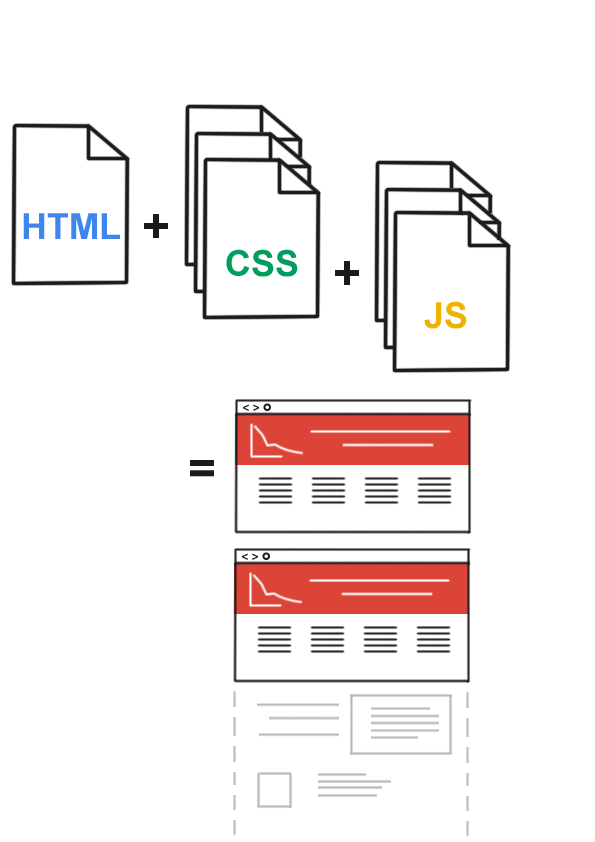
<style>
.page{position:relative;width:595px;height:842px;background:#ffffff}
.page>*{position:absolute;margin:0}
.t1{font:36px "Arial-BoldMT";color:#3e86ed}
.t2{font:48px "Arial-BoldMT";color:#1b1b1b}
.t3{font:36px "Arial-BoldMT";color:#009f5d}
.t4{font:36px "Arial-BoldMT";color:#eeb302}
</style>
<div class="page">
<p class="t1" style="left:23px;top:213px;width:97px;height:26px">HTML</p>
<p class="t2" style="left:144px;top:214px;width:24px;height:24px">+</p>
<p class="t3" style="left:226px;top:249px;width:72px;height:28px">CSS</p>
<p class="t2" style="left:335px;top:261px;width:24px;height:24px">+</p>
<p class="t4" style="left:424px;top:301px;width:43px;height:28px">JS</p>
<p class="t2" style="left:190px;top:460px;width:24px;height:17px">=</p>
</div>
